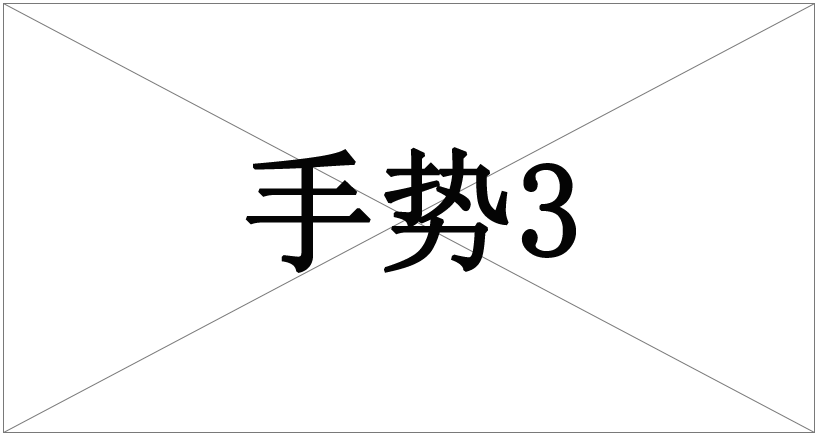
<style>
.page{position:relative;width:817px;height:435px;background:#ffffff}
.page>*{position:absolute;margin:0}
.t1{font:133.3px "SimSun";color:#040404;font-weight:bold}
</style>
<div class="page">
<p class="t1" style="left:245px;top:147px;width:331px;height:126px">手势3</p>
</div>
